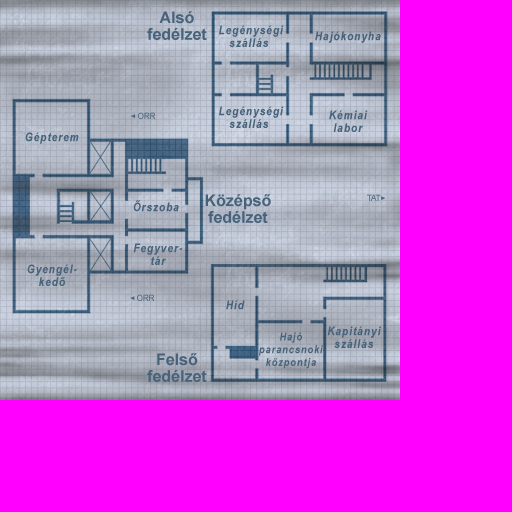
<style>
.page{position:relative;width:512px;height:512px;background:#ff00ff}
.page>*{position:absolute;margin:0}
.t1{font:16px/16.9px "Arial-BoldMT";color:#47627b}
.t2{font:12.3px/12.7px "ArialNarrow-BoldItalic";letter-spacing:0.08em;color:#47627b}
.t3{font:12.3px "ArialNarrow-BoldItalic";letter-spacing:0.08em;color:#47627b}
.t4{font:8.6px "ArialMT";letter-spacing:-0.05em;color:#47627b}
.t5{font:11.3px/12.7px "ArialNarrow-BoldItalic";letter-spacing:0.08em;color:#47627b}
</style>
<div class="page">
<p class="t1" style="left:147px;top:11px;width:60px;height:29px;text-align:center">Alsó<br>fedélzet</p>
<p class="t2" style="left:219px;top:25px;width:65px;height:22px;text-align:center">Legénységi<br>szállás</p>
<p class="t3" style="left:315px;top:31px;width:66px;height:12px">Hajókonyha</p>
<p class="t4" style="left:138px;top:112px;width:18px;height:7px">ORR</p>
<p class="t2" style="left:219px;top:106px;width:65px;height:22px;text-align:center">Legénységi<br>szállás</p>
<p class="t2" style="left:329px;top:110px;width:39px;height:22px;text-align:center">Kémiai<br>labor</p>
<p class="t3" style="left:25px;top:132px;width:54px;height:12px">Gépterem</p>
<p class="t1" style="left:205px;top:194px;width:66px;height:29px;text-align:center">Középső<br>fedélzet</p>
<p class="t4" style="left:367px;top:194px;width:14px;height:7px">TAT</p>
<p class="t3" style="left:133px;top:200px;width:46px;height:12px">Őrszoba</p>
<p class="t2" style="left:133px;top:243px;width:50px;height:22px;text-align:center">Fegyver-<br>tár</p>
<p class="t2" style="left:27px;top:264px;width:50px;height:22px;text-align:center">Gyengél-<br>kedő</p>
<p class="t4" style="left:137px;top:294px;width:18px;height:7px">ORR</p>
<p class="t3" style="left:226px;top:300px;width:19px;height:10px">Híd</p>
<p class="t2" style="left:327px;top:326px;width:54px;height:22px;text-align:center">Kapitányi<br>szállás</p>
<p class="t5" style="left:259px;top:332px;width:64px;height:37px;text-align:center">Hajó<br>parancsnoki<br>központja</p>
<p class="t1" style="left:147px;top:353px;width:60px;height:29px;text-align:center">Felső<br>fedélzet</p>
</div>
